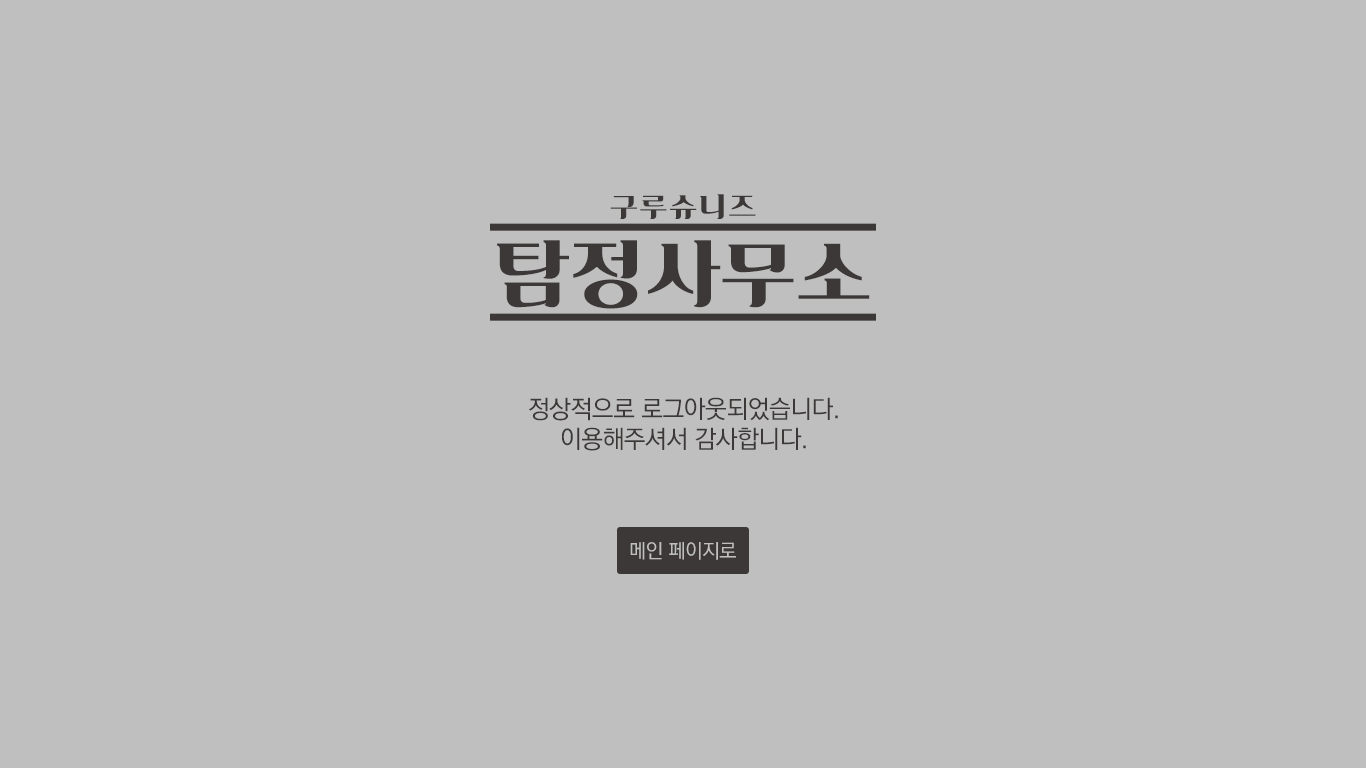
<style>
.page{position:relative;width:1366px;height:768px;background:#bfbfbf}
.page>*{position:absolute;margin:0}
.t1{font:26px "DXMacaron-KSCpc-EUC-H";letter-spacing:0.04em;color:#3c3837}
.t2{font:70px "DXMacaron-KSCpc-EUC-H";letter-spacing:-0.02em;color:#3c3837}
.t3{font:25px "KoPubWorldDotumPM";letter-spacing:-0.02em;color:#3c3837}
.t4{font:20px "KoPubWorldDotumPM";letter-spacing:-0.02em;color:#bfbfbf}
</style>
<div class="page">
<p class="t1" style="left:610px;top:194px;width:146px;height:25px">구루슈니즈</p>
<p class="t2" style="left:497px;top:240px;width:373px;height:69px">탐정사무소</p>
<p class="t3" style="left:528px;top:397px;width:310px;height:54px;text-align:center">정상적으로 로그아웃되었습니다.<br>이용해주셔서 감사합니다.</p>
<p class="t4" style="left:630px;top:542px;width:106px;height:18px">메인 페이지로</p>
</div>
